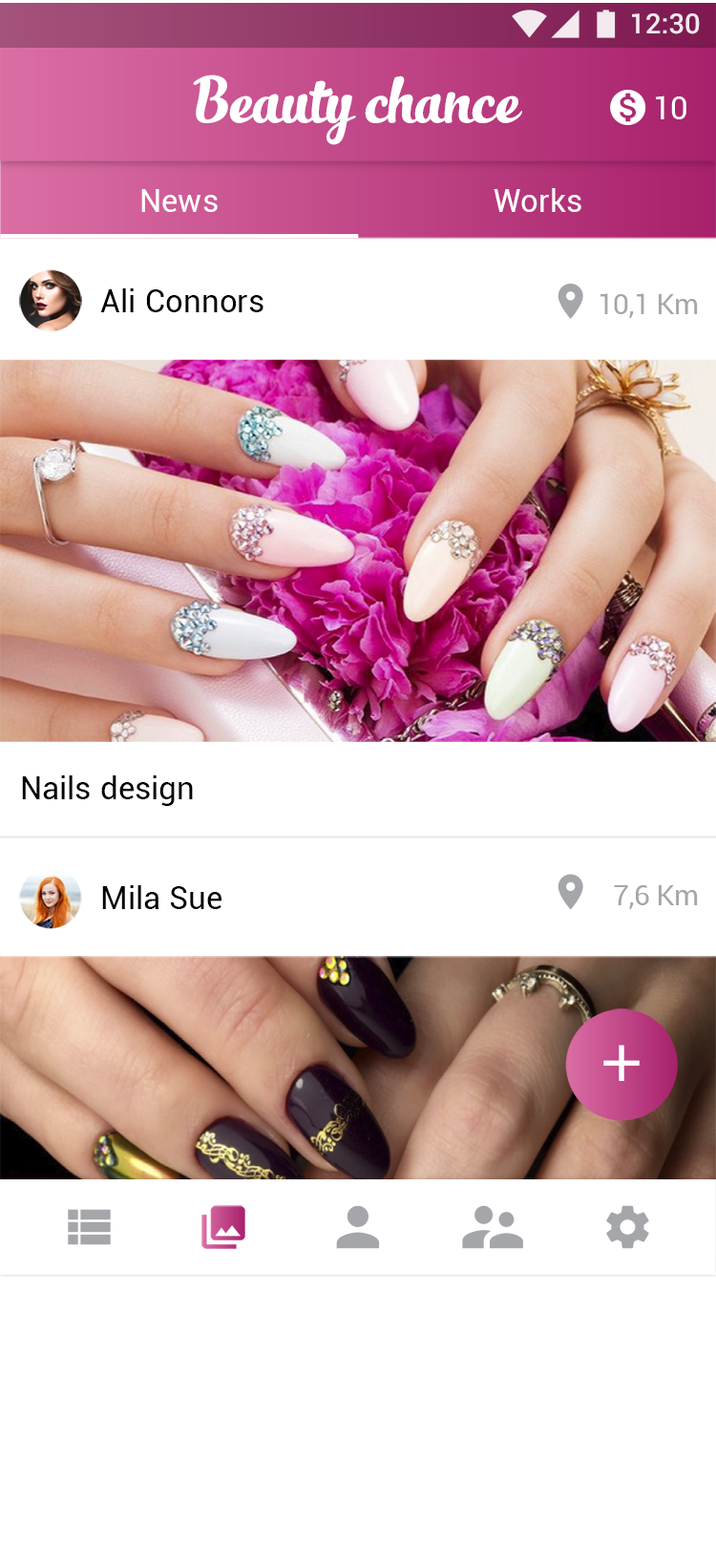
<style>
.page{position:relative;width:716px;height:1568px;background:#ffffff}
.page>*{position:absolute;margin:0}
.t1{font:27.8px "Roboto-Medium";color:#ffffff}
.t2{font:47.7px "SlimTony-Italic";color:#ffffff}
.t3{font:31.8px "Roboto-Regular";letter-spacing:-0.015em;color:#ffffff}
.t4{font:31.8px "Roboto-Regular";color:#ffffff}
.t5{font:31.8px "Roboto-Regular";letter-spacing:0.01em;color:#000000}
.t6{font:28.6px "Roboto-Regular";letter-spacing:-0.015em;color:#a5a6a9}
</style>
<div class="page">
<p class="t1" style="left:632px;top:13px;width:68px;height:21px">12:30</p>
<p class="t2" style="left:193px;top:74px;width:329px;height:71px">Beauty chance</p>
<p class="t3" style="left:656px;top:95px;width:31px;height:24px">10</p>
<p class="t4" style="left:141px;top:189px;width:77px;height:23px">News</p>
<p class="t4" style="left:494px;top:188px;width:88px;height:24px">Works</p>
<p class="t5" style="left:100px;top:288px;width:164px;height:24px">Ali Connors</p>
<p class="t6" style="left:600px;top:293px;width:98px;height:25px">10,1 Km</p>
<p class="t5" style="left:22px;top:775px;width:171px;height:31px">Nails design</p>
<p class="t5" style="left:102px;top:885px;width:120px;height:24px">Mila Sue</p>
<p class="t6" style="left:614px;top:885px;width:84px;height:24px">7,6 Km</p>
</div>
